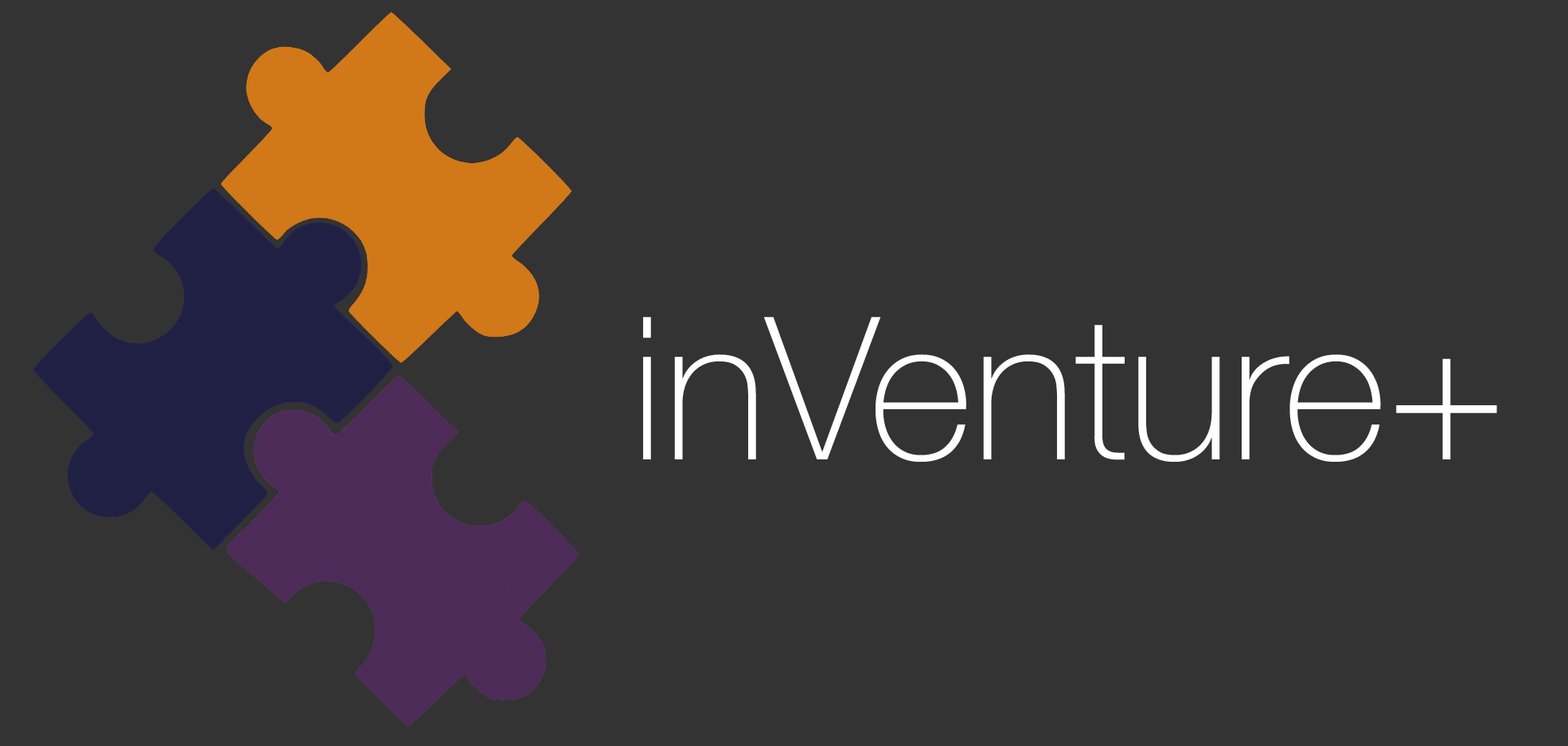
<style>
.page{position:relative;width:1568px;height:746px;background:#333333}
.page>*{position:absolute;margin:0}
.t1{font:199px "HelveticaNeue-Thin";color:#ffffff}
</style>
<div class="page">
<p class="t1" style="left:643px;top:317px;width:854px;height:145px">inVenture+</p>
</div>
